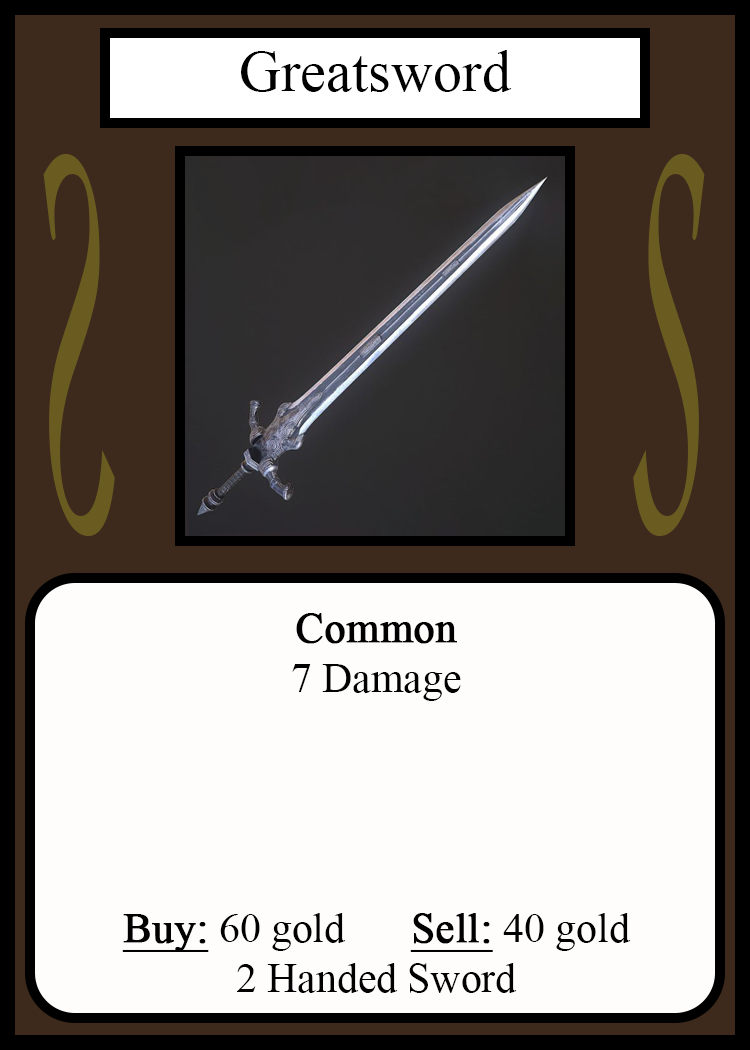
<style>
.page{position:relative;width:750px;height:1050px;background:#fffcfc}
.page>*{position:absolute;margin:0}
.t1{font:58.3px "TimesNewRomanPSMT";color:#010101}
.t2{font:548.5px "Apple-Chancery";color:#6a5c21;scale:0.27 1}
.t3{font:548.2px "Apple-Chancery";color:#6a5c21;scale:0.27 1}
.t4{font:41.7px "TimesNewRomanPSMT";color:#000000}
.t5{font:41.7px "TimesNewRomanPSMT";color:#000000;font-weight:bold}
.t6{font:41.7px "TimesNewRomanPSMT";color:#000000;font-weight:bold;text-decoration:underline}
</style>
<div class="page">
<p class="t1" style="left:241px;top:50px;width:271px;height:42px">Greatsword</p>
<p class="t2" style="left:43px;top:154px;width:72px;height:382px;rotate:180deg">S</p>
<p class="t3" style="left:633px;top:154px;width:72px;height:382px">S</p>
<p class="t4" style="left:122px;top:613px;width:509px;height:380px;text-align:center"><span class="t5">Common<br></span>7 Damage<br><br><br><br><br><span class="t6">Buy:</span> 60 gold   <span class="t6">Sell:</span> 40 gold<br>2 Handed Sword</p>
</div>
